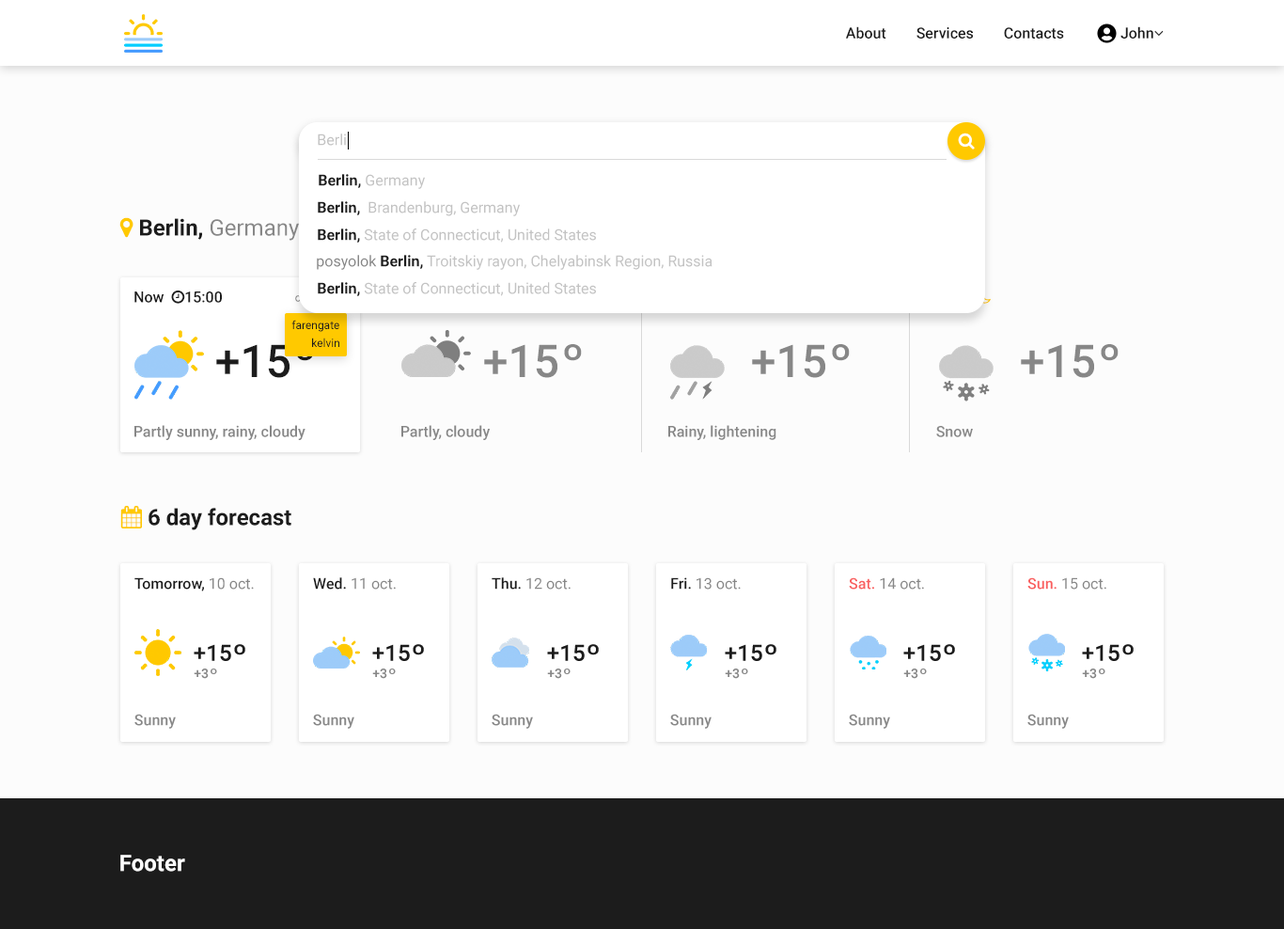
<style>
.page{position:relative;width:1284px;height:929px;background:#fcfcfc}
.page>*{position:absolute;margin:0}
.t1{font:15px "Roboto-Regular";color:#c3c3c3}
.t2{font:15px "Roboto-Bold";color:#1c1c1c}
.t3{font:15px "Roboto-Regular";color:#878787}
.t4{font:11.3px "Roboto-Regular";color:#1c1c1c}
.t5{font:45.1px "Roboto-Medium";color:#1c1c1c}
.t6{font:29.8px "Roboto-Medium";color:#ffc900;scale:1.15 1}
.t7{font:45.1px "Roboto-Medium";color:#878787}
.t8{font:29.8px "Roboto-Medium";color:#878787;scale:1.15 1}
.t9{font:15px "Roboto-Medium";color:#878787}
.t10{font:15px "Roboto-Medium";color:#1c1c1c}
.t11{font:15px "Roboto-Medium";color:#f96060}
.t12{font:22.6px "Roboto-Bold";color:#ffffff}
</style>
<div class="page">
<p class="t1" style="left:318px;top:133px;width:28px;height:13px">Berli</p>
<p class="t2" style="left:319px;top:174px;width:106px;height:15px">Berlin,<span class="t1"> Germany</span></p>
<p class="t1" style="left:318px;top:201px;width:202px;height:15px"><span class="t2">Berlin,</span>  Brandenburg, Germany</p>
<p class="t1" style="left:318px;top:228px;width:278px;height:15px"><span class="t2">Berlin,</span> State of Connecticut, United States</p>
<p class="t1" style="left:317px;top:255px;width:395px;height:15px"><span class="t3">posyolok</span><span class="t2"> Berlin,</span> Troitskiy rayon, Chelyabinsk Region, Russia</p>
<p class="t1" style="left:318px;top:282px;width:278px;height:14px"><span class="t2">Berlin,</span> State of Connecticut, United States</p>
<p class="t4" style="left:291px;top:320px;width:48px;height:12px">farengate</p>
<p class="t4" style="left:312px;top:337px;width:27px;height:10px">kelvin</p>
<p class="t5" style="left:216px;top:344px;width:74px;height:34px">+15</p>
<p class="t6" style="left:296px;top:344px;width:18px;height:17px">o</p>
<p class="t7" style="left:484px;top:344px;width:73px;height:34px">+15</p>
<p class="t8" style="left:564px;top:344px;width:18px;height:17px">o</p>
<p class="t7" style="left:752px;top:344px;width:73px;height:34px">+15</p>
<p class="t8" style="left:832px;top:344px;width:18px;height:17px">o</p>
<p class="t7" style="left:1021px;top:344px;width:73px;height:34px">+15</p>
<p class="t8" style="left:1101px;top:344px;width:18px;height:17px">o</p>
<p class="t9" style="left:134px;top:425px;width:171px;height:15px">Partly sunny, rainy, cloudy</p>
<p class="t9" style="left:401px;top:425px;width:90px;height:15px">Partly, cloudy</p>
<p class="t9" style="left:668px;top:425px;width:108px;height:15px">Rainy, lightening</p>
<p class="t9" style="left:936px;top:426px;width:37px;height:11px">Snow</p>
<p class="t10" style="left:134px;top:577px;width:120px;height:14px">Tomorrow, <span class="t3">10 oct.</span></p>
<p class="t3" style="left:313px;top:577px;width:83px;height:12px"><span class="t10">Wed. </span>11 oct.</p>
<p class="t3" style="left:492px;top:577px;width:79px;height:12px"><span class="t10">Thu. </span>12 oct.</p>
<p class="t3" style="left:671px;top:577px;width:70px;height:12px"><span class="t10">Fri. </span>13 oct.</p>
<p class="t3" style="left:849px;top:577px;width:75px;height:12px"><span class="t11">Sat. </span>14 oct.</p>
<p class="t3" style="left:1027px;top:577px;width:79px;height:12px"><span class="t11">Sun. </span>15 oct.</p>
<p class="t9" style="left:134px;top:713px;width:42px;height:15px">Sunny</p>
<p class="t9" style="left:313px;top:713px;width:41px;height:15px">Sunny</p>
<p class="t9" style="left:492px;top:713px;width:41px;height:15px">Sunny</p>
<p class="t9" style="left:670px;top:713px;width:42px;height:15px">Sunny</p>
<p class="t9" style="left:849px;top:713px;width:41px;height:15px">Sunny</p>
<p class="t9" style="left:1027px;top:713px;width:42px;height:15px">Sunny</p>
<p class="t12" style="left:120px;top:854px;width:65px;height:17px">Footer</p>
</div>
